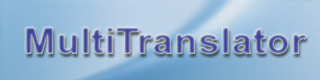
<style>
.page{position:relative;width:320px;height:80px}
.page>*{position:absolute;margin:0}
.t1{font:36px "Arial-BoldMT";scale:1.1 1}
</style>
<div class="page">
<p class="t1" style="left:26px;top:27px;width:281px;height:27px">MultiTranslator</p>
</div>
